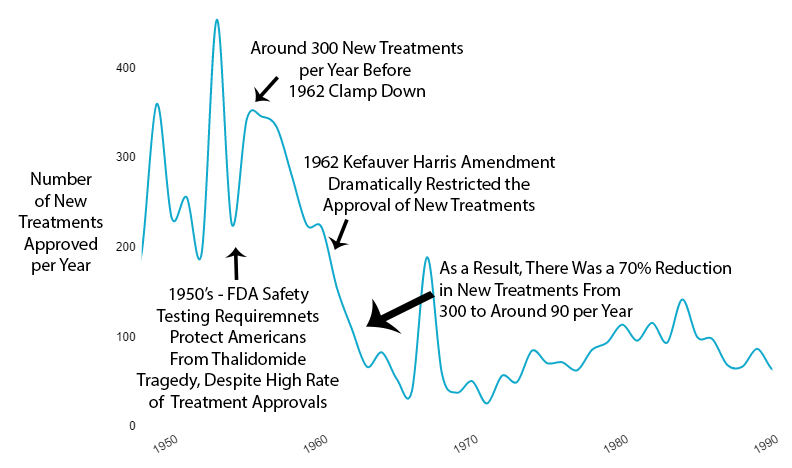
<style>
.page{position:relative;width:792px;height:468px;background:#ffffff}
.page>*{position:absolute;margin:0}
.t1{font:18px "MyriadPro-Regular";color:#000000}
</style>
<div class="page">
<p class="t1" style="left:250px;top:41px;width:213px;height:60px;text-align:center">Around 300 New Treatments<br>per Year Before <br>1962 Clamp Down</p>
<p class="t1" style="left:304px;top:155px;width:252px;height:60px;text-align:center">1962 Kefauver Harris Amendment<br>Dramatically Restricted the<br>Approval of New Treatments</p>
<p class="t1" style="left:18px;top:172px;width:85px;height:103px;text-align:center">Number<br>of New<br>Treatments<br>Approved<br>per Year</p>
<p class="t1" style="left:439px;top:261px;width:292px;height:60px">As a Result, There Was a 70% Reduction<br>in New Treatments From <br>300 to Around 90 per Year</p>
<p class="t1" style="left:136px;top:287px;width:203px;height:125px;text-align:center">1950’s - FDA Safety<br>Testing Requiremnets<br>Protect Americans<br>From Thalidomide<br>Tragedy, Despite High Rate<br>of  Treatment Approvals</p>
</div>
